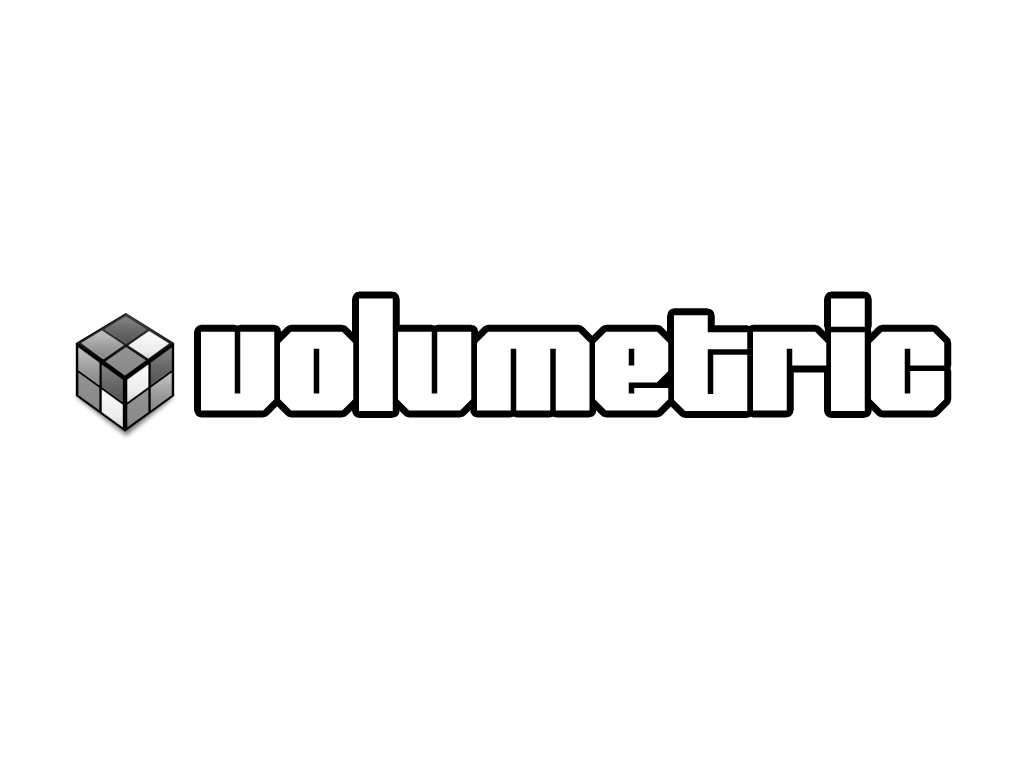
<style>
.page{position:relative;width:1024px;height:768px;background:#ffffff}
.page>*{position:absolute;margin:0}
.t1{font:180px "High-Volume";color:#ffffff}
</style>
<div class="page">
<p class="t1" style="left:201px;top:298px;width:744px;height:113px">volumetric</p>
</div>
